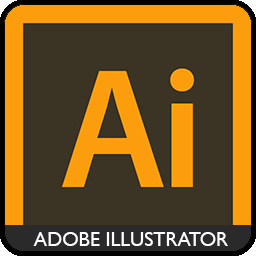
<style>
.page{position:relative;width:256px;height:256px;background:#3b3323}
.page>*{position:absolute;margin:0}
.t1{font:20px "GillSansMT";color:#ffffff}
</style>
<div class="page">
<p class="t1" style="left:33px;top:232px;width:195px;height:14px">ADOBE ILLUSTRATOR</p>
</div>
